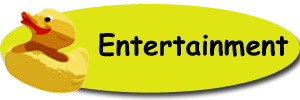
<style>
.page{position:relative;width:300px;height:100px;background:#dee513}
.page>*{position:absolute;margin:0}
.t1{font:28px "ComicSansMS-Bold";color:#000000}
</style>
<div class="page">
<p class="t1" style="left:99px;top:33px;width:190px;height:24px">Entertainment</p>
</div>
